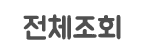
<style>
.page{position:relative;width:146px;height:53px;background:#ffffff}
.page>*{position:absolute;margin:0}
.t1{font:30.1px "BMJUA";color:#4f4f4f}
</style>
<div class="page">
<p class="t1" style="left:23px;top:14px;width:98px;height:26px">전체조회</p>
</div>
